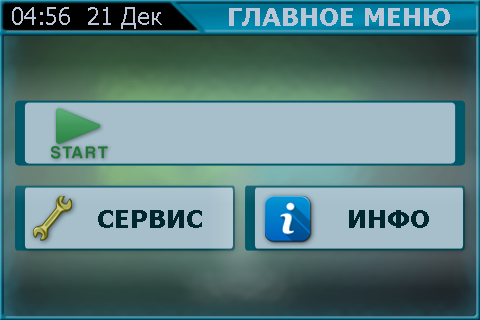
<style>
.page{position:relative;width:480px;height:320px;background:#a6bfcb}
.page>*{position:absolute;margin:0}
.t1{font:24px "Tahoma";color:#bac5d5}
.t2{font:24px "Verdana-Bold";color:#bac5d5}
.t3{font:24px "Verdana-Bold";color:#00272e}
</style>
<div class="page">
<p class="t1" style="left:12px;top:7px;width:150px;height:22px">04:56  21 Дек</p>
<p class="t2" style="left:229px;top:8px;width:221px;height:18px">ГЛАВНОЕ МЕНЮ</p>
<p class="t3" style="left:98px;top:210px;width:104px;height:18px">СЕРВИС</p>
<p class="t3" style="left:349px;top:210px;width:80px;height:18px">ИНФО</p>
</div>
